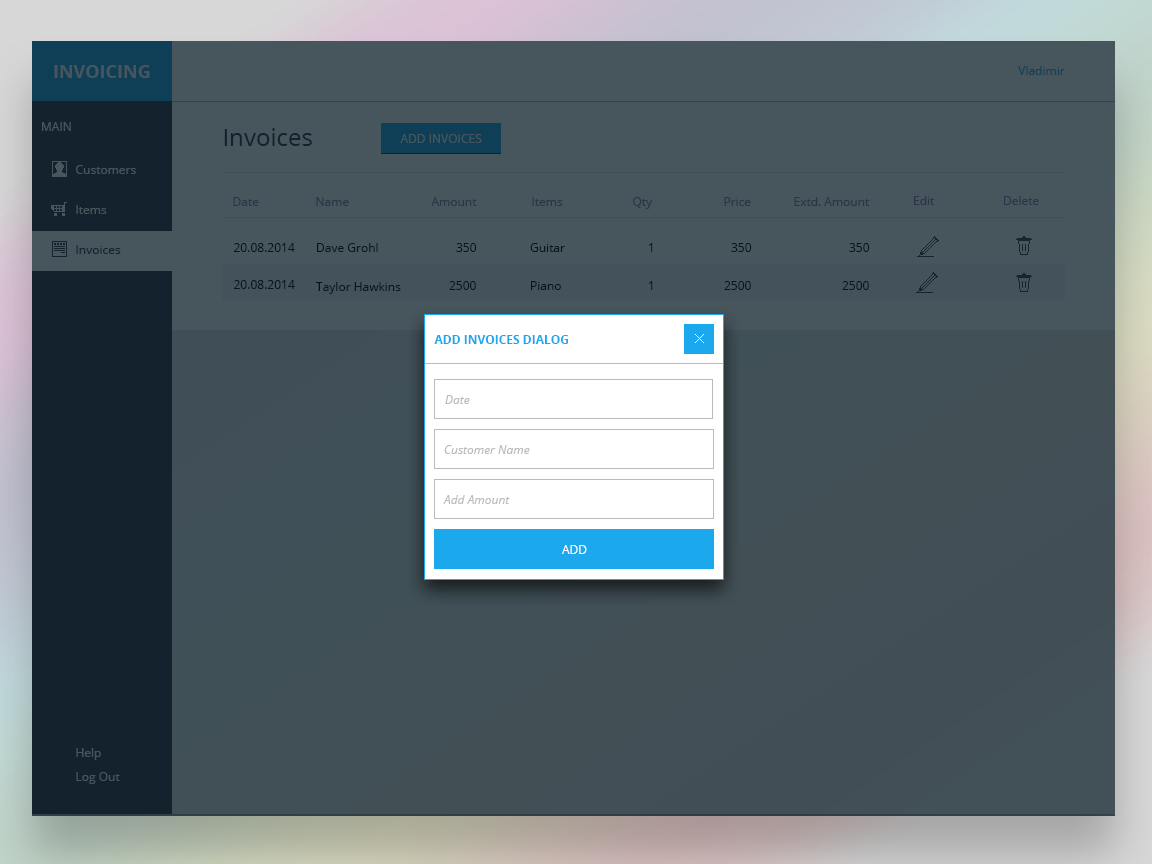
<style>
.page{position:relative;width:1152px;height:864px;background:#47555c}
.page>*{position:absolute;margin:0}
.t1{font:18px "OpenSans-Bold";color:#47555c}
.t2{font:12px "OpenSans";color:#0e3f57}
.t3{font:12px "OpenSans";color:#47555c}
.t4{font:24px "OpenSans";color:#13222c}
.t5{font:12px "OpenSans";color:#2d3449}
.t6{font:12px "OpenSans";color:#13222c}
.t7{font:12px "OpenSans";color:#07151c}
.t8{font:12px "OpenSans-Bold";color:#1ba8ed}
.t9{font:12px "OpenSans-Italic";color:#bbbbbb}
.t10{font:12px "OpenSans";color:#ffffff}
</style>
<div class="page">
<p class="t1" style="left:54px;top:65px;width:96px;height:13px">INVOICING</p>
<p class="t2" style="left:1018px;top:66px;width:47px;height:9px">Vladimir</p>
<p class="t3" style="left:42px;top:122px;width:29px;height:9px">MAIN</p>
<p class="t4" style="left:224px;top:128px;width:88px;height:18px">Invoices</p>
<p class="t3" style="left:400px;top:134px;width:82px;height:9px">ADD INVOICES</p>
<p class="t3" style="left:76px;top:165px;width:60px;height:9px">Customers</p>
<p class="t5" style="left:233px;top:197px;width:26px;height:9px">Date</p>
<p class="t5" style="left:316px;top:197px;width:33px;height:9px">Name</p>
<p class="t5" style="left:431px;top:197px;width:46px;height:9px">Amount</p>
<p class="t5" style="left:532px;top:197px;width:31px;height:9px">Items</p>
<p class="t5" style="left:633px;top:197px;width:19px;height:12px">Qty</p>
<p class="t5" style="left:724px;top:197px;width:27px;height:9px">Price</p>
<p class="t5" style="left:794px;top:197px;width:76px;height:9px">Extd. Amount</p>
<p class="t5" style="left:914px;top:196px;width:21px;height:9px">Edit</p>
<p class="t5" style="left:1004px;top:196px;width:35px;height:9px">Delete</p>
<p class="t3" style="left:76px;top:205px;width:31px;height:9px">Items</p>
<p class="t6" style="left:76px;top:245px;width:45px;height:9px">Invoices</p>
<p class="t7" style="left:234px;top:243px;width:61px;height:9px">20.08.2014</p>
<p class="t7" style="left:317px;top:243px;width:61px;height:9px">Dave Grohl</p>
<p class="t7" style="left:456px;top:243px;width:21px;height:9px">350</p>
<p class="t7" style="left:530px;top:243px;width:35px;height:9px">Guitar</p>
<p class="t7" style="left:649px;top:243px;width:4px;height:9px">1</p>
<p class="t7" style="left:731px;top:243px;width:21px;height:9px">350</p>
<p class="t7" style="left:849px;top:243px;width:21px;height:9px">350</p>
<p class="t7" style="left:234px;top:280px;width:61px;height:9px">20.08.2014</p>
<p class="t7" style="left:449px;top:281px;width:27px;height:9px">2500</p>
<p class="t7" style="left:531px;top:281px;width:30px;height:9px">Piano</p>
<p class="t7" style="left:649px;top:281px;width:4px;height:9px">1</p>
<p class="t7" style="left:724px;top:281px;width:27px;height:9px">2500</p>
<p class="t7" style="left:842px;top:281px;width:27px;height:9px">2500</p>
<p class="t7" style="left:316px;top:282px;width:85px;height:12px">Taylor Hawkins</p>
<p class="t8" style="left:434px;top:335px;width:135px;height:9px">ADD INVOICES DIALOG</p>
<p class="t9" style="left:445px;top:395px;width:25px;height:9px">Date</p>
<p class="t9" style="left:444px;top:445px;width:86px;height:9px">Customer Name</p>
<p class="t9" style="left:443px;top:495px;width:67px;height:9px">Add Amount</p>
<p class="t10" style="left:562px;top:545px;width:25px;height:9px">ADD</p>
<p class="t3" style="left:76px;top:748px;width:25px;height:12px">Help</p>
<p class="t3" style="left:76px;top:772px;width:44px;height:12px">Log Out</p>
</div>
